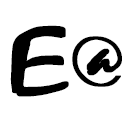
<style>
.page{position:relative;width:125px;height:125px;background:#ffffff}
.page>*{position:absolute;margin:0}
.t1{font:72px "VNI-Thufap1";color:#000000;font-weight:bold}
</style>
<div class="page">
<p class="t1" style="left:10px;top:25px;width:112px;height:72px">E@</p>
</div>
